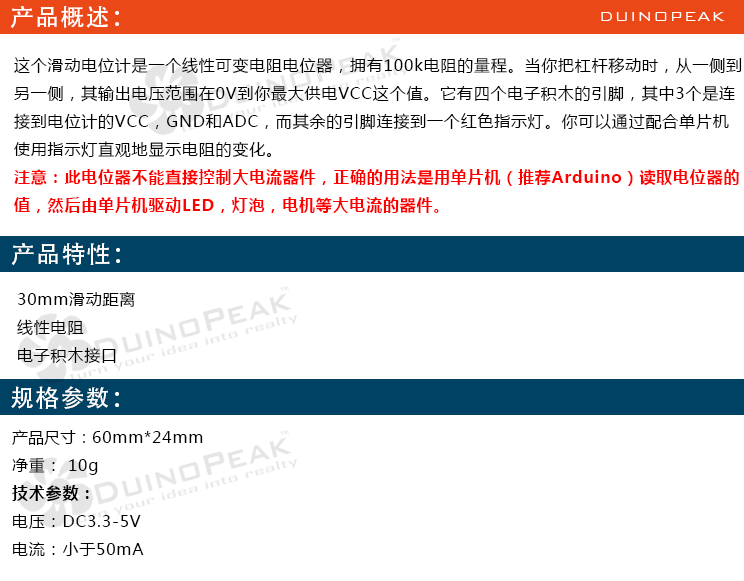
<style>
.page{position:relative;width:744px;height:581px;background:#ffffff}
.page>*{position:absolute;margin:0}
.t1{font:24px "AdobeHeitiStd-Regular";letter-spacing:0.05em;color:#ffffff}
.t2{font:18px "BankGothicBT-Light";letter-spacing:0.05em;color:#ffffff}
.t3{font:16px "MicrosoftYaHei";letter-spacing:0.05em;color:#000000}
.t4{font:16px "MicrosoftYaHei-Bold";letter-spacing:0.05em;color:#ff0000}
.t5{font:16px "MicrosoftYaHei";color:#000000}
.t6{font:16px "MicrosoftYaHei-Bold";letter-spacing:0.05em;color:#000000}
</style>
<div class="page">
<p class="t1" style="left:10px;top:6px;width:109px;height:23px">产品概述：</p>
<p class="t2" style="left:601px;top:12px;width:124px;height:9px">DUINOPEAK</p>
<p class="t3" style="left:14px;top:57px;width:728px;height:156px">这个滑动电位计是一个线性可变电阻电位器，拥有100k电阻的量程。当你把杠杆移动时，从一侧到<br>另一侧，其输出电压范围在0V到你最大供电VCC这个值。它有四个电子积木的引脚，其中3个是连<br>接到电位计的VCC，GND和ADC，而其余的引脚连接到一个红色指示灯。你可以通过配合单片机<br>使用指示灯直观地显示电阻的变化。<br><span class="t4">注意：此电位器不能直接控制大电流器件，正确的用法是用单片机（推荐Arduino）读取电位器的<br>值，然后由单片机驱动LED，灯泡，电机等大电流的器件。</span></p>
<p class="t1" style="left:11px;top:242px;width:109px;height:24px">产品特性：</p>
<p class="t3" style="left:17px;top:291px;width:118px;height:72px">30mm滑动距离<br>线性电阻<br>电子积木接口</p>
<p class="t1" style="left:11px;top:386px;width:108px;height:23px">规格参数：</p>
<p class="t3" style="left:12px;top:430px;width:191px;height:126px"><span class="t5">产品尺寸：</span>60mm*24mm<br>净重： 10g<br><span class="t6">技术参数：<br></span>电压：DC3.3-5V<br>电流：小于50mA</p>
</div>
